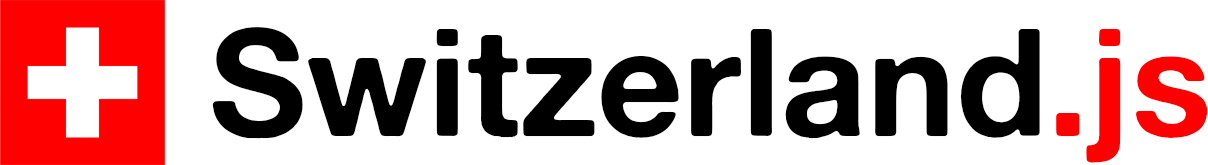
<style>
.page{position:relative;width:1208px;height:165px;background:#ffffff}
.page>*{position:absolute;margin:0}
.t1{font:150px "AlteHaasGrotesk_Bold";color:#000000}
.t2{font:150px "AlteHaasGrotesk_Bold";color:#ff0000}
</style>
<div class="page">
<p class="t1" style="left:212px;top:27px;width:996px;height:136px">Switzerland<span class="t2">.js</span></p>
</div>
